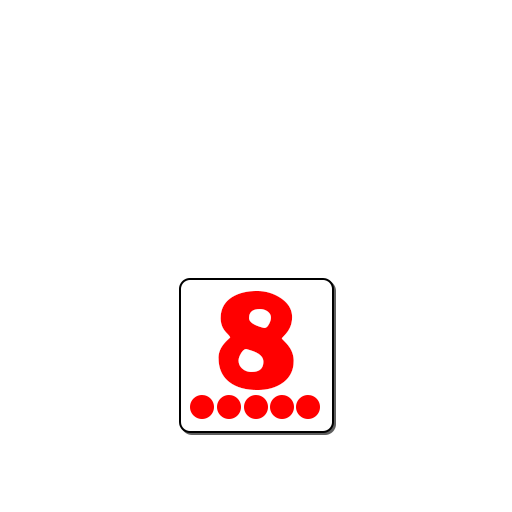
<style>
.page{position:relative;width:512px;height:512px;background:#ffffff}
.page>*{position:absolute;margin:0}
.t1{font:160px "BerlinSansFBDemi-Bold";color:#ff0000}
</style>
<div class="page">
<p class="t1" style="left:218px;top:291px;width:76px;height:99px">8</p>
</div>
